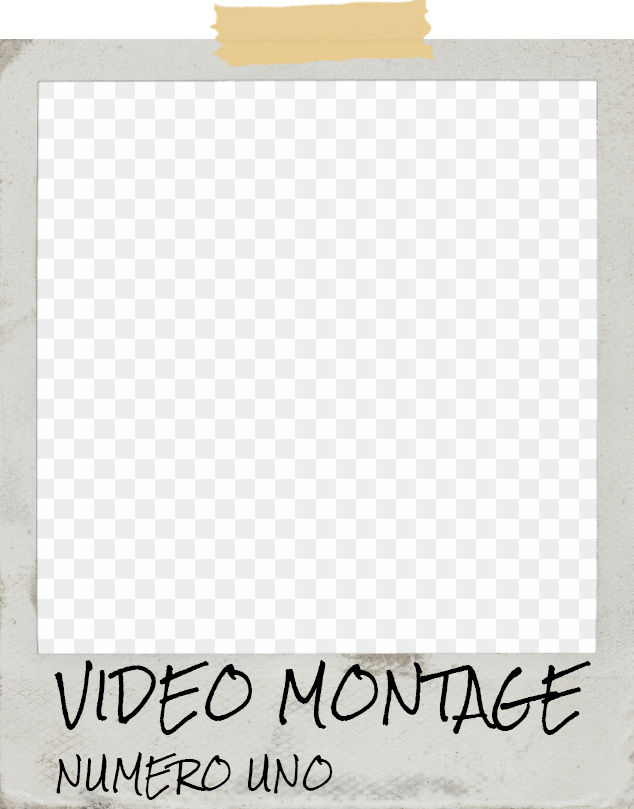
<style>
.page{position:relative;width:634px;height:809px;background:#fefefe}
.page>*{position:absolute;margin:0}
.t1{font:48px "RockSalt-Regular";letter-spacing:0.025em;color:#000000}
.t2{font:30px "RockSalt-Regular";letter-spacing:0.025em;color:#000000}
</style>
<div class="page">
<p class="t1" style="left:54px;top:660px;width:537px;height:140px">VIDEO MONTAGE<br><span class="t2"><br>NUMERO UNO</span></p>
</div>
